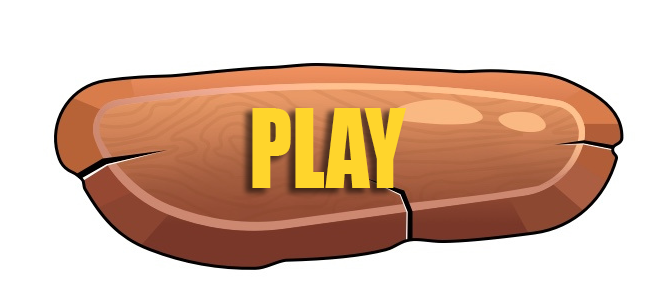
<style>
.page{position:relative;width:666px;height:305px;background:#ffffff}
.page>*{position:absolute;margin:0}
.t1{font:100.8px "Impact";color:#ffd52c;scale:0.85 1}
</style>
<div class="page">
<p class="t1" style="left:252px;top:108px;width:154px;height:80px">PLAY</p>
</div>
